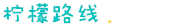
<style>
.page{position:relative;width:174px;height:27px;background:#ffffff}
.page>*{position:absolute;margin:0}
.t1{font:22px "BauhausITC";letter-spacing:0.1em;color:#02c1bf}
</style>
<div class="page">
<p class="t1" style="left:3px;top:3px;width:96px;height:21px">柠檬路线</p>
</div>
